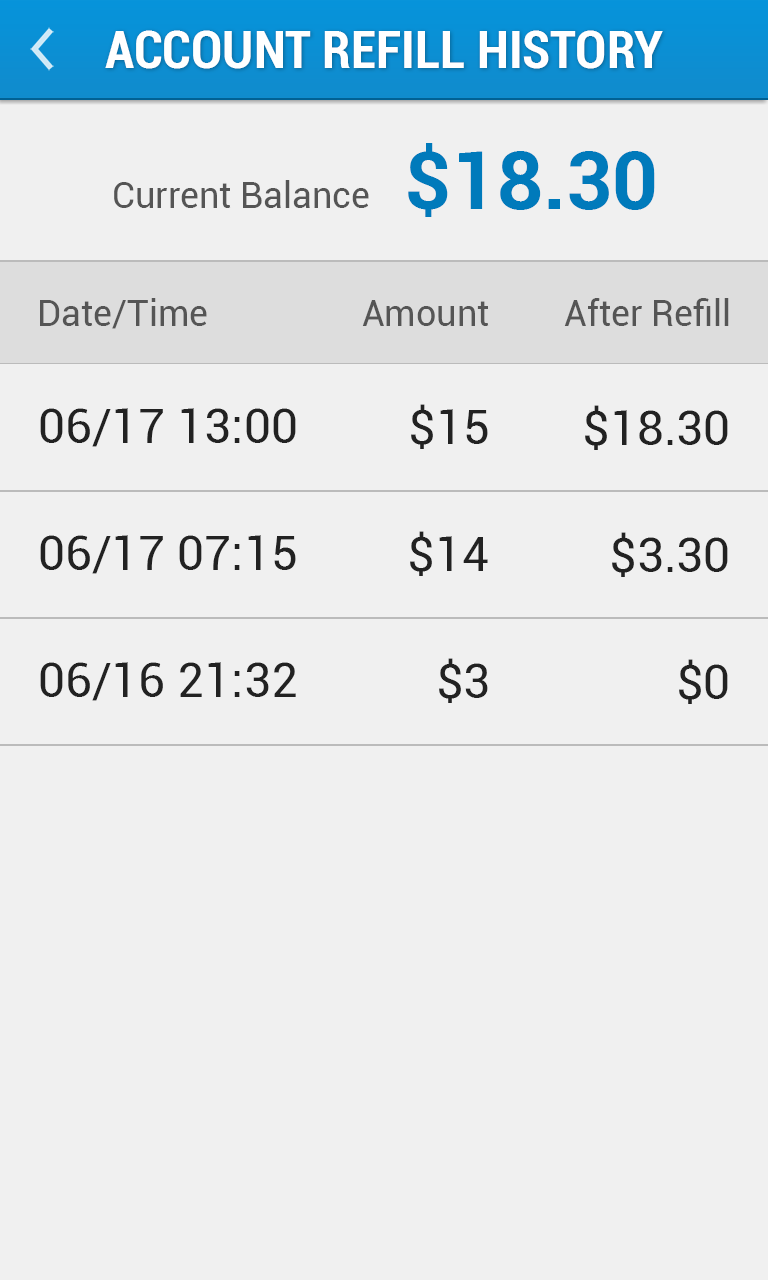
<style>
.page{position:relative;width:768px;height:1280px;background:#f0f0f0}
.page>*{position:absolute;margin:0}
.t1{font:52px "Roboto-BoldCondensed";color:#ffffff}
.t2{font:80px "Roboto-Bold";color:#007abb}
.t3{font:36px "Roboto-Regular";color:#555555}
.t4{font:48px "Roboto-Regular";color:#222222}
</style>
<div class="page">
<p class="t1" style="left:105px;top:30px;width:558px;height:39px">ACCOUNT REFILL HISTORY</p>
<p class="t2" style="left:408px;top:143px;width:247px;height:74px">$18.30</p>
<p class="t3" style="left:114px;top:180px;width:255px;height:28px">Current Balance</p>
<p class="t3" style="left:40px;top:298px;width:167px;height:31px">Date/Time</p>
<p class="t3" style="left:362px;top:300px;width:127px;height:26px">Amount</p>
<p class="t3" style="left:564px;top:298px;width:165px;height:28px">After Refill</p>
<p class="t4" style="left:40px;top:408px;width:256px;height:39px">06/17 13:00</p>
<p class="t4" style="left:411px;top:404px;width:77px;height:45px">$15</p>
<p class="t4" style="left:585px;top:405px;width:143px;height:45px">$18.30</p>
<p class="t4" style="left:410px;top:531px;width:78px;height:45px">$14</p>
<p class="t4" style="left:612px;top:532px;width:116px;height:45px">$3.30</p>
<p class="t4" style="left:40px;top:535px;width:256px;height:39px">06/17 07:15</p>
<p class="t4" style="left:40px;top:662px;width:256px;height:39px">06/16 21:32</p>
<p class="t4" style="left:439px;top:658px;width:49px;height:45px">$3</p>
<p class="t4" style="left:679px;top:659px;width:49px;height:45px">$0</p>
</div>
